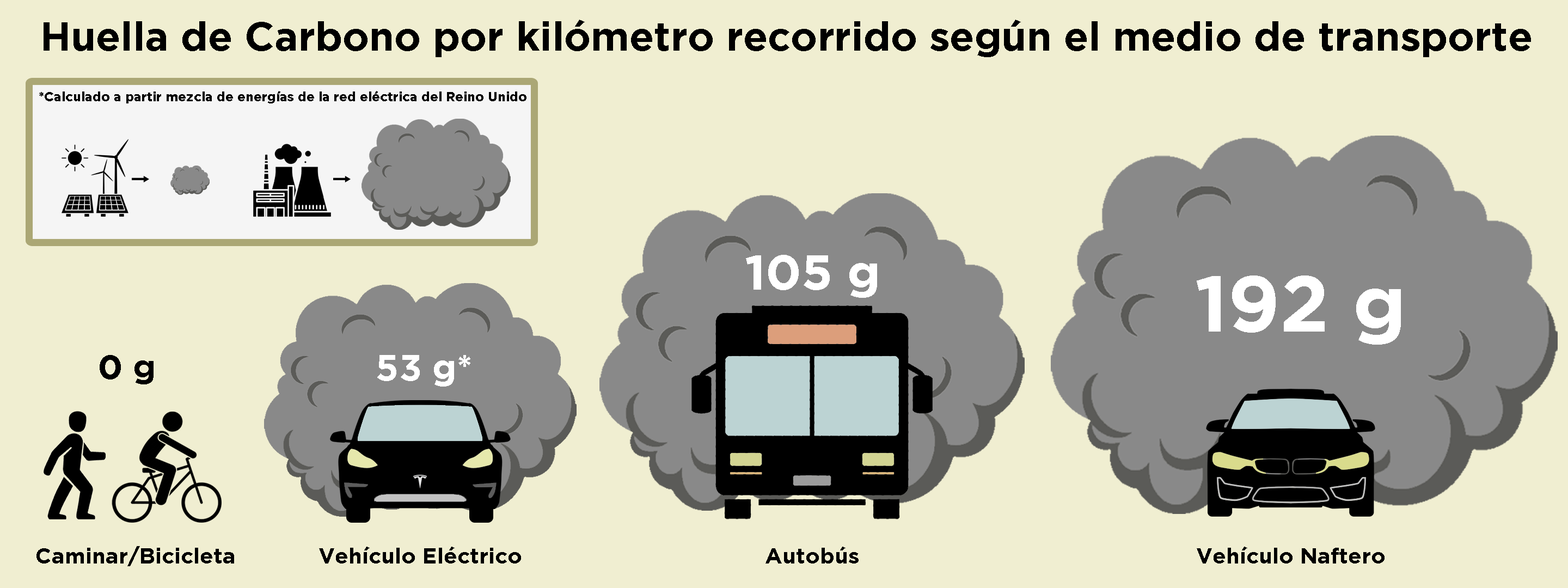
<style>
.page{position:relative;width:1568px;height:588px;background:#f0eed1}
.page>*{position:absolute;margin:0}
.t1{font:40.3px "Gotham-Bold";color:#000000}
.t2{font:13.1px "Gotham-Bold";color:#000000}
.t3{font:49px "Gotham-Bold";color:#ffffff}
.t4{font:78.9px "Gotham-Bold";color:#ffffff}
.t5{font:33.8px "Gotham-Bold";color:#000000}
.t6{font:36.5px "Gotham-Bold";color:#ffffff}
.t7{font:21.8px "Gotham-Bold";color:#000000}
</style>
<div class="page">
<p class="t1" style="left:44px;top:20px;width:1487px;height:37px">Huella de Carbono por kilómetro recorrido según el medio de transporte</p>
<p class="t2" style="left:39px;top:91px;width:487px;height:12px">*Calculado a partir mezcla de energías de la red eléctrica del Reino Unido</p>
<p class="t3" style="left:746px;top:255px;width:131px;height:43px">105 g</p>
<p class="t4" style="left:1197px;top:275px;width:204px;height:70px">192 g</p>
<p class="t5" style="left:100px;top:355px;width:54px;height:29px">0 g</p>
<p class="t6" style="left:377px;top:355px;width:93px;height:32px">53 g*</p>
<p class="t7" style="left:36px;top:546px;width:198px;height:20px">Caminar/Bicicleta</p>
<p class="t7" style="left:319px;top:547px;width:202px;height:17px">Vehículo Eléctrico</p>
<p class="t7" style="left:765px;top:547px;width:94px;height:17px">Autobús</p>
<p class="t7" style="left:1197px;top:547px;width:188px;height:17px">Vehículo Naftero</p>
</div>
